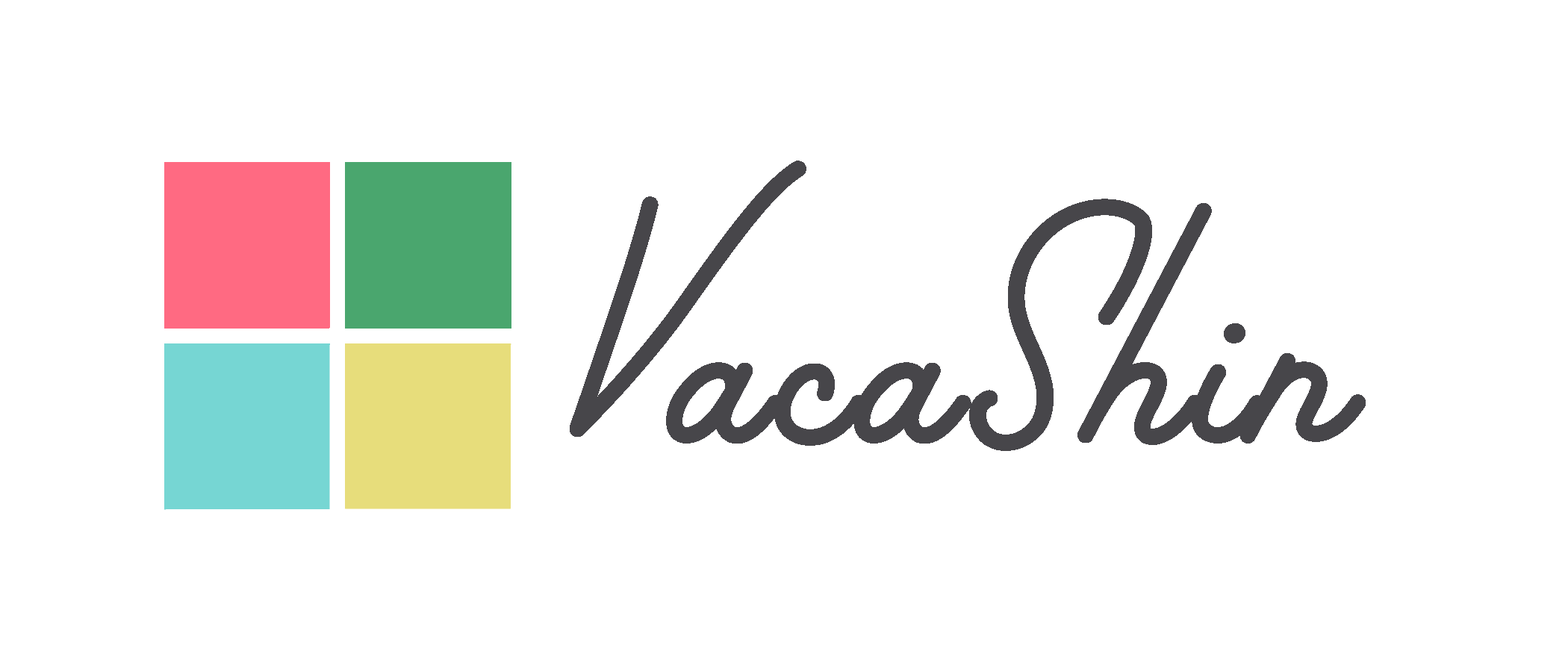
<style>
.page{position:relative;width:1568px;height:672px;background:#ffffff}
.page>*{position:absolute;margin:0}
.t1{font:311.1px "PalmCanyonDrive-Trial";letter-spacing:0.025em;color:#47464a}
.t2{font:311.1px "PalmCanyonDrive-Trial";letter-spacing:0.025em;color:#47464a;scale:1.05 1}
</style>
<div class="page">
<p class="t1" style="left:570px;top:161px;width:796px;height:290px">Vaca<span class="t2">S</span>hin</p>
</div>
